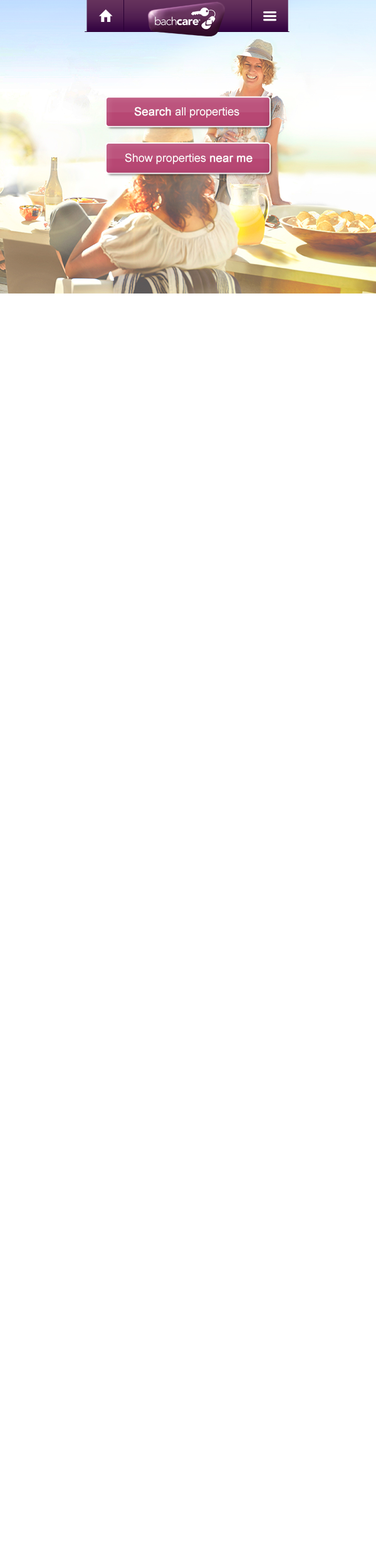
<style>
.page{position:relative;width:376px;height:1568px;background:#ffffff}
.page>*{position:absolute;margin:0}
.t1{font:11.3px "ArialMT";color:#ffffff}
.t2{font:11.3px "ArialMT";color:#ffffff;font-weight:bold}
</style>
<div class="page">
<p class="t1" style="left:134px;top:107px;width:106px;height:11px"><span class="t2">Search </span>all properties</p>
<p class="t1" style="left:125px;top:153px;width:128px;height:11px">Show properties <span class="t2">near me</span></p>
</div>
